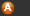
<style>
.page{position:relative;width:30px;height:16px;background:#333333}
.page>*{position:absolute;margin:0}
.t1{font:14px "DTAC-Bold";color:#ffffff}
</style>
<div class="page">
<p class="t1" style="left:4px;top:3px;width:8px;height:8px">A</p>
</div>
